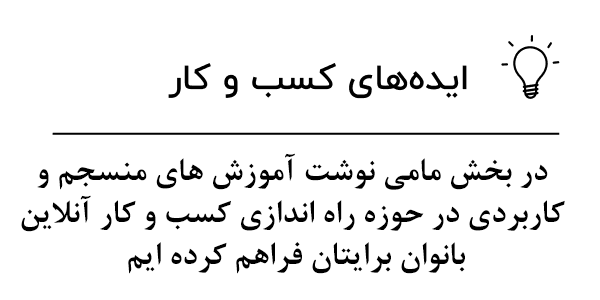
<style>
.page{position:relative;width:600px;height:300px;background:#ffffff}
.page>*{position:absolute;margin:0}
.t1{font:35px "BNazaninBold";color:#000000}
</style>
<div class="page">
<p class="t1" style="left:21px;top:153px;width:544px;height:121px;text-align:center">در بخش مامی نوشت آموزش های منسجم و <br>کاربردی در حوزه راه اندازی کسب و کار آنلاین <br>بانوان برایتان فراهم کرده ایم</p>
</div>
